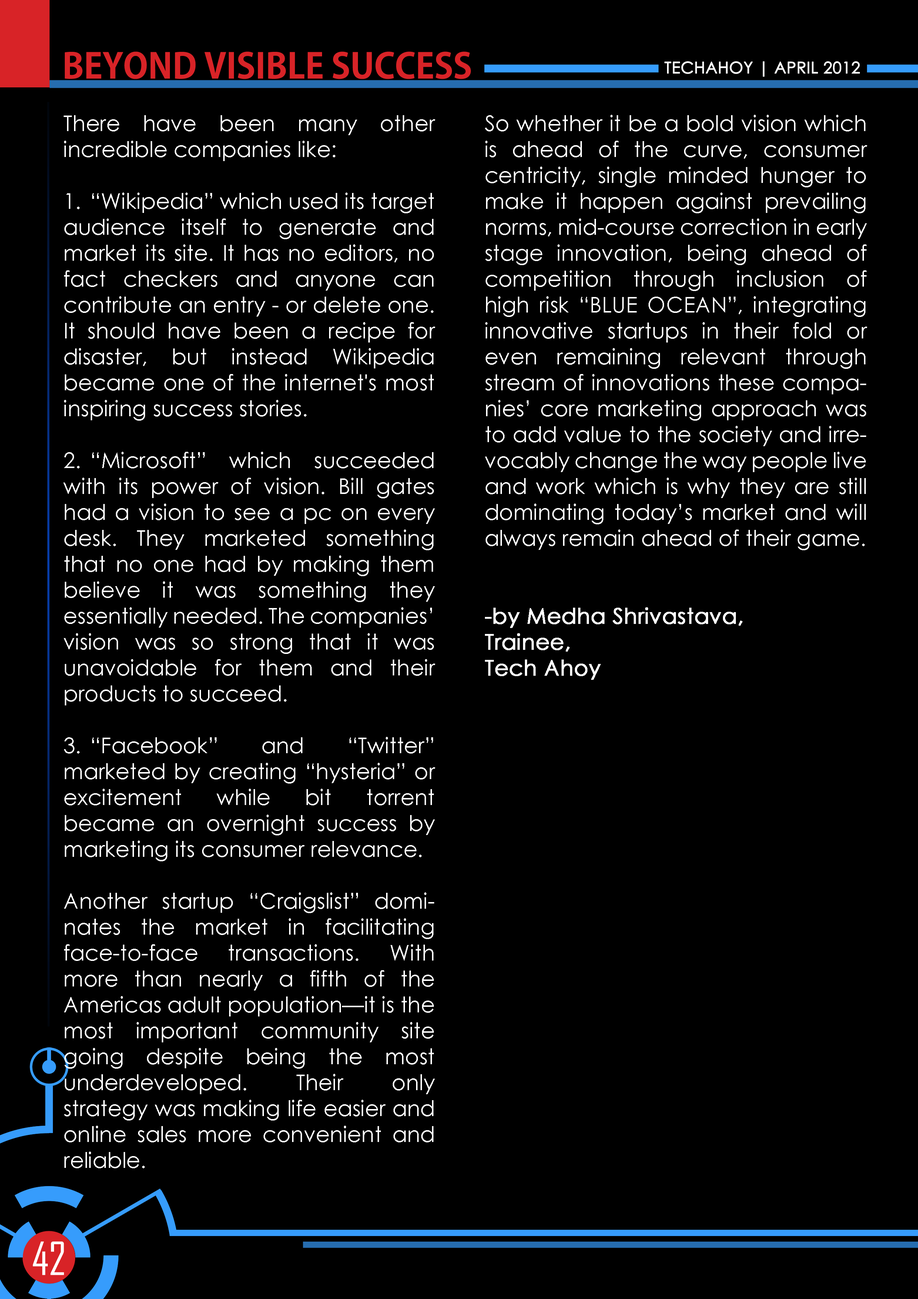
<style>
.page{position:relative;width:918px;height:1299px;background:#000000}
.page>*{position:absolute;margin:0}
.t1{font:34.5px "AdobeGothicStd-Bold";color:#d82327;text-transform:uppercase}
.t2{font:16px "CenturyGothic";color:#ffffff;text-transform:uppercase;font-weight:bold}
.t3{font:21.6px "CenturyGothic";color:#ffffff}
.t4{font:21.6px "CenturyGothic";color:#ffffff;font-weight:bold}
.t5{font:43.7px "AgencyFB-Reg";color:#ffffff;text-transform:uppercase}
</style>
<div class="page">
<p class="t1" style="left:65px;top:51px;width:406px;height:28px">BEYOND VISIBLE SUCCESS</p>
<p class="t2" style="left:665px;top:61px;width:195px;height:16px">techahoy | APRIL 2012</p>
<p class="t3" style="left:63px;top:115px;width:372px;height:1053px;text-align:justify">There have been many other incredible companies like:<br><br>1. “Wikipedia” which used its target audience itself to generate and market its site. It has no editors, no fact checkers and anyone can contribute an entry - or delete one. It should have been a recipe for disaster, but instead Wikipedia became one of the internet's most inspiring success stories.<br><br>2. “Microsoft” which succeeded with its power of vision. Bill gates had a vision to see a pc on every desk. They marketed something that no one had by making them believe it was something they essentially needed. The companies’ vision was so strong that it was unavoidable for them and their products to succeed.<br><br>3. “Facebook” and “Twitter” marketed by creating “hysteria” or excitement while bit torrent became an overnight success by marketing its consumer relevance.<br><br>Another startup “Craigslist” dominates the market in facilitating face-to-face transactions. With more than nearly a fifth of the Americas adult population—it is the most important community site going despite being the most underdeveloped. Their only strategy was making life easier and online sales more convenient and reliable.</p>
<p class="t3" style="left:485px;top:115px;width:382px;height:565px;text-align:justify">So whether it be a bold vision which is ahead of the curve, consumer centricity, single minded hunger to make it happen against prevailing norms, mid-course correction in early stage innovation, being ahead of competition through inclusion of high risk “BLUE OCEAN”, integrating innovative startups in their fold or even remaining relevant through stream of innovations these companies’ core marketing approach was to add value to the society and irrevocably change the way people live and work which is why they are still dominating today’s market and will always remain ahead of their game.<br><br><br><span class="t4">-by Medha Shrivastava,<br>Trainee,<br>Tech Ahoy</span></p>
<p class="t5" style="left:33px;top:1241px;width:31px;height:34px">42</p>
</div>
